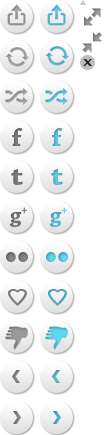
<style>
.page{position:relative;width:105px;height:435px;background:#ffffff}
.page>*{position:absolute;margin:0}
.t1{font:9.1px "CharcoalCY";color:#202020;scale:1.57 1}
.t2{font:25.1px "ChaparralPro-Bold";color:#848484}
.t3{font:25.1px "ChaparralPro-Bold";color:#53b9d3}
.t4{font:28.1px "ChaparralPro-Bold";color:#848484}
.t5{font:28.1px "ChaparralPro-Bold";color:#56bfd9}
.t6{font:12px "ChaparralPro-Bold";color:#848484}
.t7{font:12px "ChaparralPro-Bold";color:#60d6f3}
.t8{font:22.2px "ChaparralPro-Bold";color:#848484;scale:0.92 1}
.t9{font:22.2px "ChaparralPro-Bold";color:#51b4cd;scale:0.92 1}
</style>
<div class="page">
<p class="t1" style="left:83px;top:59px;width:9px;height:7px">X</p>
<p class="t2" style="left:12px;top:128px;width:11px;height:18px">f</p>
<p class="t3" style="left:52px;top:128px;width:11px;height:18px">f</p>
<p class="t4" style="left:11px;top:169px;width:12px;height:16px">t</p>
<p class="t5" style="left:51px;top:169px;width:12px;height:16px">t</p>
<p class="t6" style="left:21px;top:207px;width:6px;height:7px">+</p>
<p class="t7" style="left:61px;top:207px;width:6px;height:7px">+</p>
<p class="t8" style="left:10px;top:212px;width:12px;height:15px">g</p>
<p class="t9" style="left:50px;top:212px;width:12px;height:15px">g</p>
</div>
